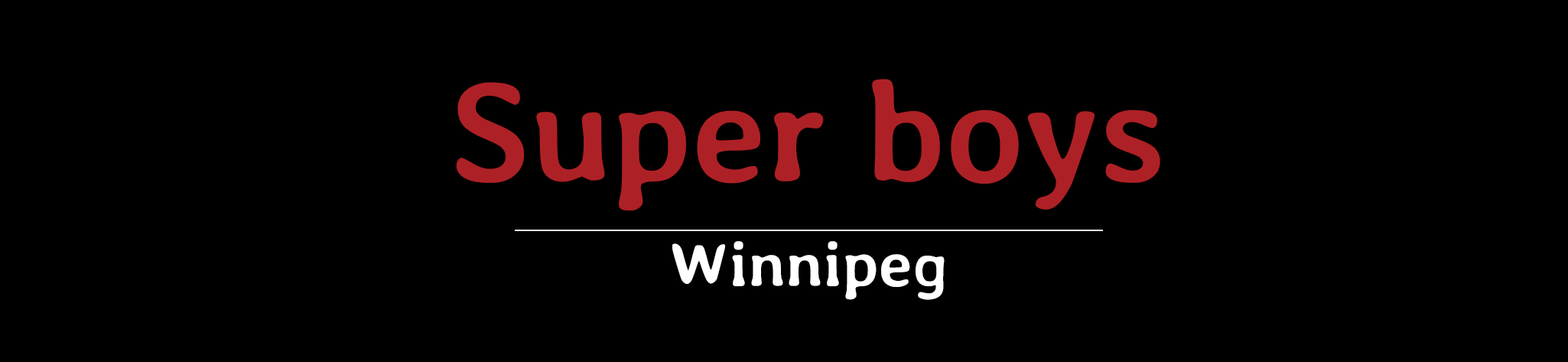
<style>
.page{position:relative;width:1568px;height:362px;background:#000000}
.page>*{position:absolute;margin:0}
.t1{font:142px "AveriaLibre-Bold";color:#ad2126}
.t2{font:64.2px "AveriaLibre-Bold";color:#ffffff}
</style>
<div class="page">
<p class="t1" style="left:456px;top:79px;width:704px;height:131px">Super boys</p>
<p class="t2" style="left:672px;top:241px;width:273px;height:59px">Winnipeg</p>
</div>
